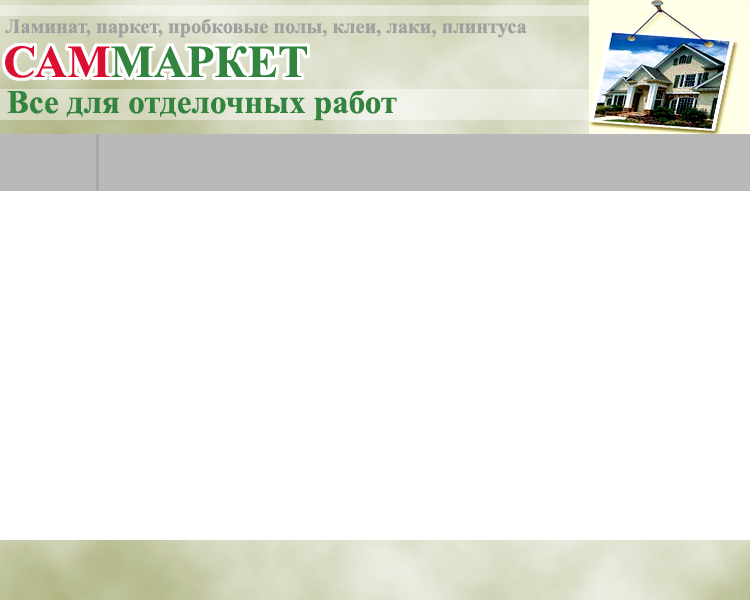
<style>
.page{position:relative;width:750px;height:600px;background:#ffffff}
.page>*{position:absolute;margin:0}
.t1{font:20.3px "TimesNewRomanPS-BoldMT";color:#a0a0a0}
.t2{font:45.7px "TimesNewRomanPS-BoldMT";color:#32843f}
.t3{font:45.7px "TimesNewRomanPS-BoldMT";color:#d90e31}
.t4{font:33px "TimesNewRomanPS-BoldMT";color:#32843f}
</style>
<div class="page">
<p class="t1" style="left:5px;top:19px;width:522px;height:19px">Ламинат, паркет, пробковые полы, клеи, лаки, плинтуса</p>
<p class="t2" style="left:5px;top:46px;width:302px;height:32px"><span class="t3">САМ</span>МАРКЕТ</p>
<p class="t4" style="left:7px;top:90px;width:390px;height:31px">Все для отделочных работ</p>
</div>
